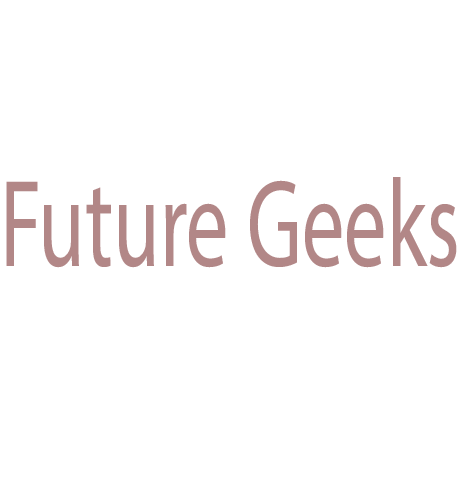
<style>
.page{position:relative;width:460px;height:480px;background:#ffffff}
.page>*{position:absolute;margin:0}
.t1{font:125px "MyriadPro-Regular";color:#b28787;scale:0.68 1}
</style>
<div class="page">
<p class="t1" style="left:6px;top:177px;width:451px;height:91px">Future Geeks</p>
</div>
